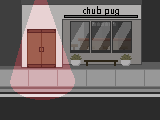
<style>
.page{position:relative;width:160px;height:120px}
.page>*{position:absolute;margin:0}
.t1{font:10px "AvenirNextCondensed-Regular";color:#000000}
</style>
<div class="page">
<p class="t1" style="left:83px;top:6px;width:36px;height:10px">chub pug</p>
</div>
